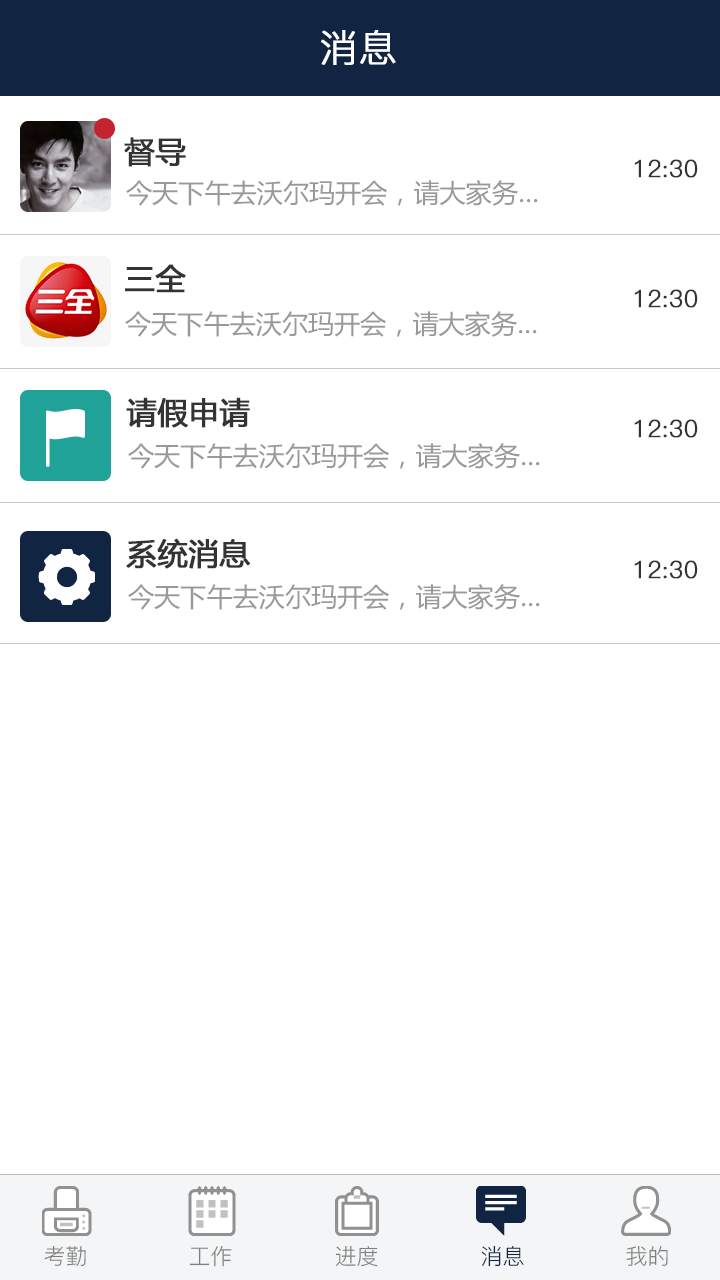
<style>
.page{position:relative;width:720px;height:1280px;background:#ffffff}
.page>*{position:absolute;margin:0}
.t1{font:38px "PingFang-SC-Regular";color:#ffffff;font-weight:bold}
.t2{font:30px "MicrosoftYaHei";color:#333333;font-weight:bold}
.t3{font:24px "PingFang-SC-Regular";color:#333333;font-weight:bold}
.t4{font:26px "MicrosoftYaHei";color:#999999}
.t5{font:22px "PingFang-SC-Regular";color:#808080}
.t6{font:22px "PingFang-SC-Regular";color:#112441}
</style>
<div class="page">
<p class="t1" style="left:321px;top:30px;width:75px;height:35px">消息</p>
<p class="t2" style="left:124px;top:137px;width:62px;height:30px">督导</p>
<p class="t3" style="left:634px;top:159px;width:64px;height:19px">12:30</p>
<p class="t4" style="left:126px;top:180px;width:412px;height:26px">今天下午去沃尔玛开会，请大家务…</p>
<p class="t2" style="left:125px;top:264px;width:61px;height:29px">三全</p>
<p class="t3" style="left:634px;top:289px;width:64px;height:19px">12:30</p>
<p class="t4" style="left:125px;top:311px;width:412px;height:26px">今天下午去沃尔玛开会，请大家务…</p>
<p class="t2" style="left:126px;top:397px;width:124px;height:31px">请假申请</p>
<p class="t3" style="left:634px;top:419px;width:64px;height:19px">12:30</p>
<p class="t4" style="left:128px;top:443px;width:412px;height:26px">今天下午去沃尔玛开会，请大家务…</p>
<p class="t2" style="left:126px;top:538px;width:124px;height:31px">系统消息</p>
<p class="t3" style="left:634px;top:560px;width:64px;height:19px">12:30</p>
<p class="t4" style="left:128px;top:584px;width:412px;height:26px">今天下午去沃尔玛开会，请大家务…</p>
<p class="t5" style="left:44px;top:1245px;width:42px;height:22px">考勤</p>
<p class="t5" style="left:189px;top:1246px;width:43px;height:21px">工作</p>
<p class="t5" style="left:335px;top:1246px;width:43px;height:21px">进度</p>
<p class="t6" style="left:481px;top:1245px;width:43px;height:22px">消息</p>
<p class="t5" style="left:626px;top:1245px;width:42px;height:21px">我的</p>
</div>
